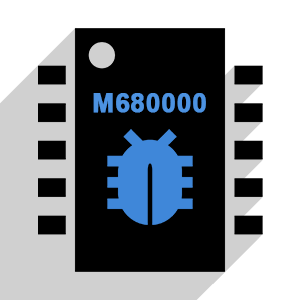
<style>
.page{position:relative;width:300px;height:300px;background:#000000}
.page>*{position:absolute;margin:0}
.t1{font:26.4px "Arial-BoldMT";color:#4c92e1;font-weight:bold}
</style>
<div class="page">
<p class="t1" style="left:93px;top:93px;width:113px;height:20px">M680000</p>
</div>
